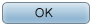
<style>
.page{position:relative;width:92px;height:26px}
.page>*{position:absolute;margin:0}
.t1{font:12px "ArialMT";letter-spacing:0.025em;color:#101010}
</style>
<div class="page">
<p class="t1" style="left:35px;top:8px;width:18px;height:10px">OK</p>
</div>
